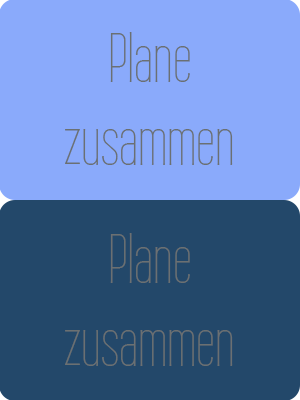
<style>
.page{position:relative;width:300px;height:400px;background:#8aaafb}
.page>*{position:absolute;margin:0}
.t1{font:69px "WireOne";color:#6b7072}
</style>
<div class="page">
<p class="t1" style="left:65px;top:32px;width:168px;height:133px;text-align:center">Plane<br>zusammen</p>
<p class="t1" style="left:65px;top:233px;width:168px;height:133px;text-align:center">Plane<br>zusammen</p>
</div>
